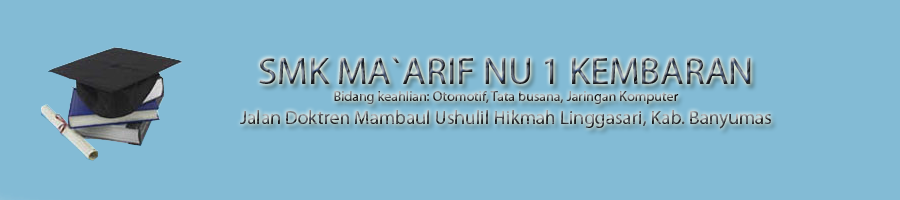
<style>
.page{position:relative;width:900px;height:200px;background:#83bbd5}
.page>*{position:absolute;margin:0}
.t1{font:19.2px "MyriadPro-Regular"}
.t2{font:38.4px "MyriadPro-Regular"}
.t3{font:14px "MyriadPro-Regular"}
</style>
<div class="page">
<p class="t1" style="left:240px;top:57px;width:531px;height:72px;text-align:center"><span class="t2">SMK MA`ARIF NU 1 KEMBARAN<br></span><span class="t3">Bidang keahlian: Otomotif, Tata busana, Jaringan Komputer<br></span>Jalan Doktren Mambaul Ushulil Hikmah Linggasari, Kab. Banyumas</p>
</div>
